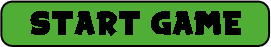
<style>
.page{position:relative;width:271px;height:47px;background:#50ae37}
.page>*{position:absolute;margin:0}
.t1{font:18px "SpaceComics";color:#000000}
</style>
<div class="page">
<p class="t1" style="left:30px;top:11px;width:211px;height:25px">START GAME</p>
</div>
